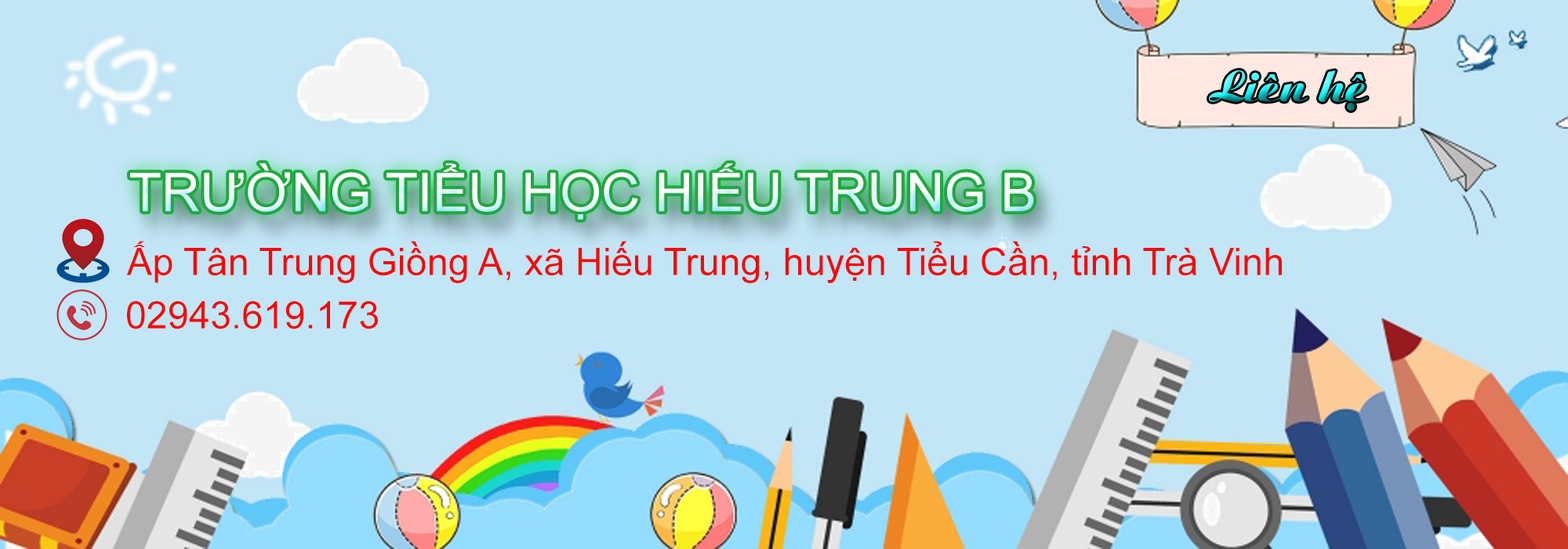
<style>
.page{position:relative;width:1568px;height:549px;background:#c2e6f6}
.page>*{position:absolute;margin:0}
.t1{font:45.7px "VNI-Ariston"}
.t2{font:53.4px "ArialMT";color:#ffffff}
.t3{font:38.1px "ArialMT";color:#f70808}
</style>
<div class="page">
<p class="t1" style="left:1209px;top:70px;width:158px;height:41px">Lieân heä</p>
<p class="t2" style="left:130px;top:163px;width:904px;height:57px">TRƯỜNG TIỂU HỌC HIẾU TRUNG B</p>
<p class="t3" style="left:126px;top:241px;width:1156px;height:42px">Ấp Tân Trung Giồng A, xã Hiếu Trung, huyện Tiểu Cần, tỉnh Trà Vinh</p>
<p class="t3" style="left:127px;top:301px;width:251px;height:28px">02943.619.173</p>
</div>
